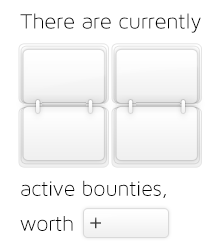
<style>
.page{position:relative;width:220px;height:250px;background:#ffffff}
.page>*{position:absolute;margin:0}
.t1{font:22.3px "MavenProLight300-Regular";letter-spacing:-0.01em;color:#000000}
.t2{font:22px/35px "MavenProLight300-Regular";letter-spacing:-0.01em;color:#000000}
.t3{font:23px "AnonymousPro";color:#3b3b3b}
</style>
<div class="page">
<p class="t1" style="left:20px;top:13px;width:181px;height:20px">There are currently</p>
<p class="t2" style="left:20px;top:180px;width:146px;height:51px">active bounties,<br>worth</p>
<p class="t3" style="left:90px;top:217px;width:11px;height:12px">+</p>
</div>
